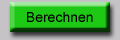
<style>
.page{position:relative;width:120px;height:40px;background:#1ec915}
.page>*{position:absolute;margin:0}
.t1{font:14px "ArialMT";color:#000000}
</style>
<div class="page">
<p class="t1" style="left:27px;top:12px;width:66px;height:10px">Berechnen</p>
</div>
